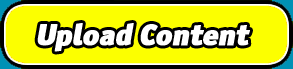
<style>
.page{position:relative;width:293px;height:69px;background:#fcff00}
.page>*{position:absolute;margin:0}
.t1{font:30px "OfficinaSansBlackOSC";letter-spacing:-0.025em;color:#ffffff;font-weight:bold;font-style:italic}
</style>
<div class="page">
<p class="t1" style="left:37px;top:23px;width:213px;height:29px">Upload Content</p>
</div>
